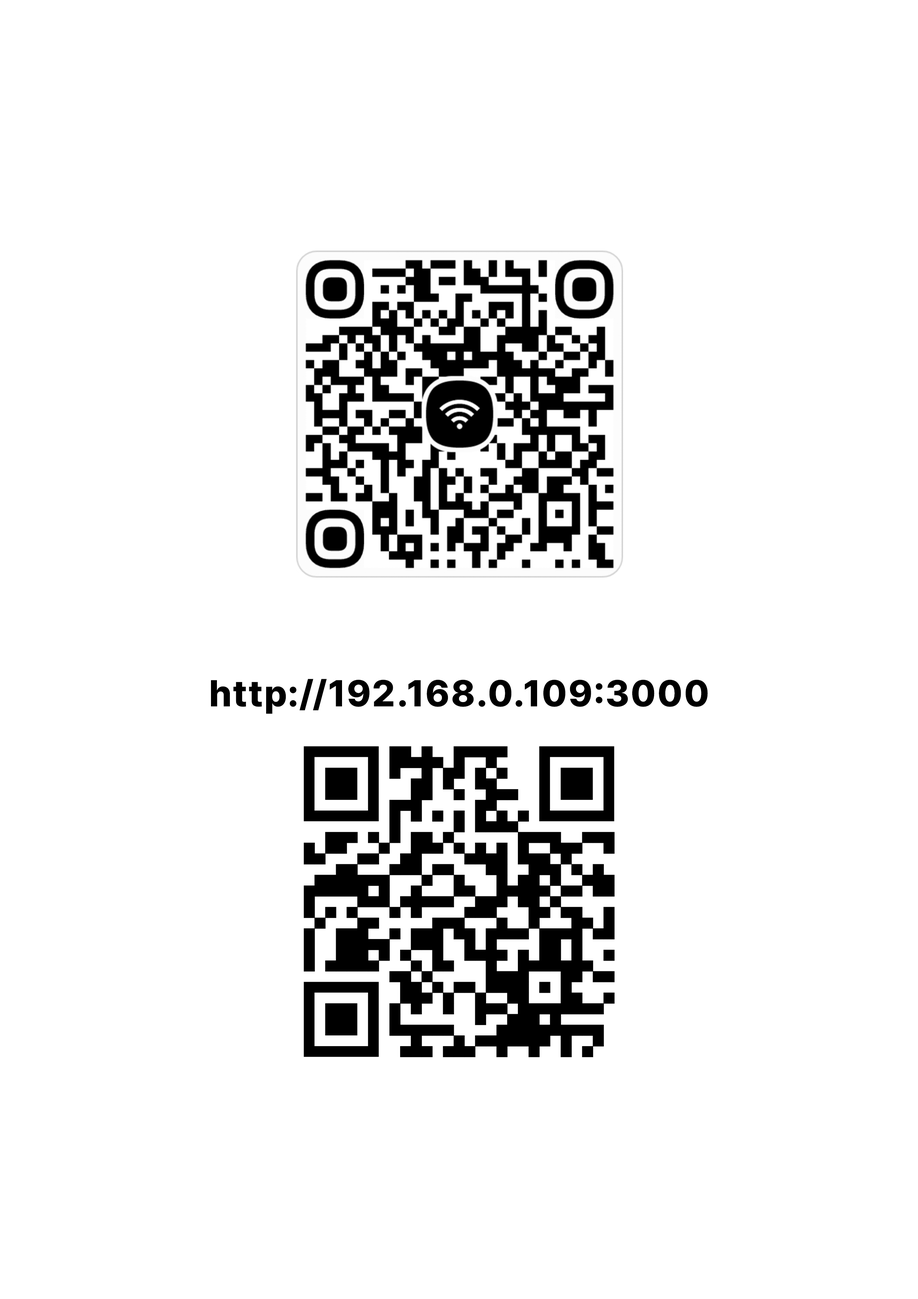
<style>
.page{position:relative;width:918px;height:1299px;background:#ffffff}
.page>*{position:absolute;margin:0}
.t1{font:37px "Pretendard-ExtraBold";letter-spacing:0.05em;color:#000000}
</style>
<div class="page">
<p class="t1" style="left:211px;top:679px;width:497px;height:35px">http://192.168.0.109:3000</p>
</div>
